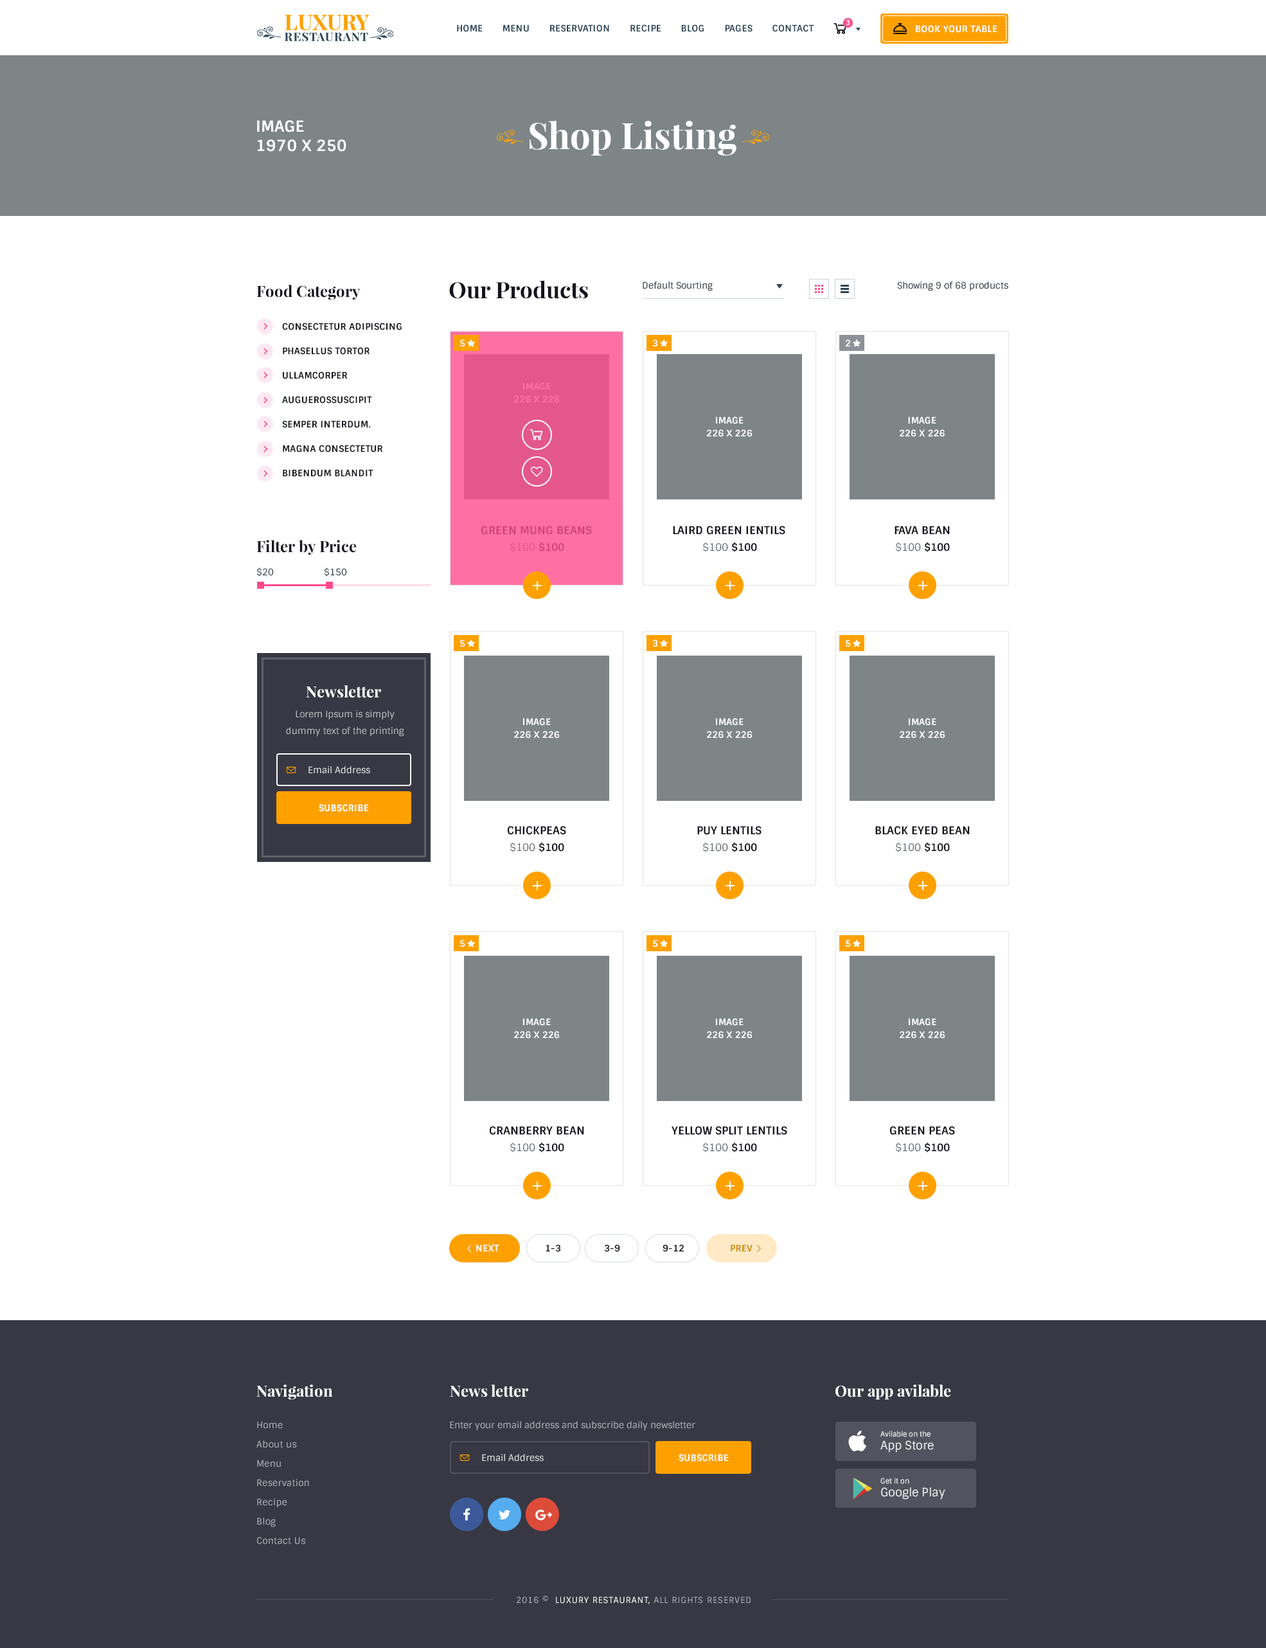
<style>
.page{position:relative;width:1266px;height:1648px;background:#ffffff}
.page>*{position:absolute;margin:0}
.t1{font:9px "Sintony-Bold";letter-spacing:0.025em;color:#2c465a;text-transform:uppercase}
.t2{font:7.1px "Sintony-Bold";letter-spacing:0.025em;color:#ffffff;text-transform:uppercase}
.t3{font:9px "Sintony-Bold";letter-spacing:0.025em;color:#ffffff;text-transform:uppercase}
.t4{font:15.4px/19.3px "Sintony-Bold";letter-spacing:0.005em;color:#ffffff;text-transform:uppercase}
.t5{font:36px "PlayfairDisplay-Bold";color:#ffffff}
.t6{font:22.5px "PlayfairDisplay-Bold";color:#14141d}
.t7{font:9px "Sintony";color:#363d43}
.t8{font:15.4px "PlayfairDisplay-Bold";color:#14141d}
.t9{font:9px/24.4px "Sintony-Bold";letter-spacing:0.025em;color:#14141d;text-transform:uppercase}
.t10{font:9px "Sintony-Bold";color:#ffffff;text-transform:uppercase}
.t11{font:9px/12.9px "Sintony-Bold";letter-spacing:0.005em;color:#fe70a4;text-transform:uppercase}
.t12{font:9px/12.9px "Sintony-Bold";letter-spacing:0.005em;color:#ffffff;text-transform:uppercase}
.t13{font:10.9px "Sintony-Bold";color:#cf4177;text-transform:uppercase}
.t14{font:10.9px "Sintony-Bold";color:#14141d;text-transform:uppercase}
.t15{font:10.3px "Sintony";color:#cf4177}
.t16{font:10.3px "Sintony-Bold";color:#cf4177}
.t17{font:10.3px "Sintony";color:#5c6369}
.t18{font:10.3px "Sintony-Bold";color:#14141d}
.t19{font:15.4px "PlayfairDisplay-Bold";color:#ffffff}
.t20{font:9px/16.7px "Sintony";color:#bcbdc1}
.t21{font:9px "Sintony";color:#e6e9eb}
.t22{font:9px "Sintony-Bold";color:#14141d}
.t23{font:9px "Sintony-Bold";letter-spacing:0.025em;color:#d38a0c;text-transform:uppercase}
.t24{font:9px/19.3px "Sintony";letter-spacing:0.025em;color:#adb2b7}
.t25{font:9px "Sintony";color:#adb2b7}
.t26{font:7.1px/12.9px "Sintony";color:#edf1f3}
.t27{font:11.6px/12.9px "Sintony";color:#edf1f3}
.t28{font:8.4px "Sintony";letter-spacing:0.075em;color:#adb2b7;text-transform:uppercase}
.t29{font:8.4px "Sintony";letter-spacing:0.075em;color:#ffffff;text-transform:uppercase}
</style>
<div class="page">
<p class="t1" style="left:457px;top:24px;width:357px;height:8px">Home       menu       reservation       recipe       blog       Pages       contact</p>
<p class="t2" style="left:846px;top:19px;width:5px;height:7px">3</p>
<p class="t3" style="left:916px;top:25px;width:82px;height:8px">Book your table</p>
<p class="t4" style="left:257px;top:120px;width:89px;height:32px">Image<br>1970 x 250</p>
<p class="t5" style="left:530px;top:120px;width:207px;height:36px">Shop Listing</p>
<p class="t6" style="left:449px;top:280px;width:139px;height:19px">Our Products</p>
<p class="t7" style="left:643px;top:282px;width:70px;height:9px">Default Sourting</p>
<p class="t7" style="left:897px;top:282px;width:112px;height:9px">Showing 9 of 68 products</p>
<p class="t8" style="left:256px;top:285px;width:105px;height:15px">Food Category</p>
<p class="t9" style="left:282px;top:323px;width:120px;height:154px">consectetur adipiscing<br>Phasellus tortor<br>ullamcorper<br>auguerossuscipit<br>semper interdum.<br>magna consectetur<br>bibendum blandit</p>
<p class="t10" style="left:460px;top:339px;width:5px;height:8px">5</p>
<p class="t10" style="left:652px;top:339px;width:6px;height:8px">3</p>
<p class="t10" style="left:846px;top:339px;width:5px;height:7px">2</p>
<p class="t11" style="left:514px;top:382px;width:45px;height:21px;text-align:center">Image<br>226 x 226</p>
<p class="t12" style="left:707px;top:417px;width:45px;height:20px;text-align:center">Image<br>226 x 226</p>
<p class="t12" style="left:900px;top:417px;width:45px;height:20px;text-align:center">Image<br>226 x 226</p>
<p class="t13" style="left:482px;top:526px;width:110px;height:9px">green mung beans</p>
<p class="t14" style="left:673px;top:526px;width:113px;height:9px">laird green ientils</p>
<p class="t14" style="left:895px;top:526px;width:55px;height:8px">Fava bean</p>
<p class="t8" style="left:256px;top:540px;width:101px;height:15px">Filter by Price</p>
<p class="t15" style="left:510px;top:542px;width:54px;height:10px">$100 <span class="t16">$100</span></p>
<p class="t17" style="left:703px;top:542px;width:54px;height:10px">$100 <span class="t18">$100</span></p>
<p class="t17" style="left:896px;top:542px;width:54px;height:10px">$100 <span class="t18">$100</span></p>
<p class="t7" style="left:256px;top:568px;width:18px;height:9px">$20</p>
<p class="t7" style="left:324px;top:568px;width:23px;height:9px">$150</p>
<p class="t10" style="left:460px;top:640px;width:5px;height:7px">5</p>
<p class="t10" style="left:652px;top:640px;width:6px;height:7px">3</p>
<p class="t10" style="left:846px;top:640px;width:5px;height:7px">5</p>
<p class="t19" style="left:306px;top:685px;width:75px;height:13px">Newsletter</p>
<p class="t20" style="left:286px;top:710px;width:118px;height:27px;text-align:center">Lorem Ipsum is simply dummy text of the printing and typesetting industry</p>
<p class="t12" style="left:514px;top:718px;width:45px;height:21px;text-align:center">Image<br>226 x 226</p>
<p class="t12" style="left:707px;top:718px;width:45px;height:21px;text-align:center">Image<br>226 x 226</p>
<p class="t12" style="left:900px;top:718px;width:45px;height:21px;text-align:center">Image<br>226 x 226</p>
<p class="t21" style="left:309px;top:766px;width:61px;height:8px">Email Address</p>
<p class="t3" style="left:319px;top:804px;width:50px;height:8px">Subscribe</p>
<p class="t14" style="left:508px;top:826px;width:58px;height:9px">chickpeas</p>
<p class="t14" style="left:698px;top:826px;width:64px;height:9px">puy lentils</p>
<p class="t14" style="left:876px;top:826px;width:94px;height:9px">black eyed bean</p>
<p class="t17" style="left:510px;top:842px;width:54px;height:10px">$100 <span class="t18">$100</span></p>
<p class="t17" style="left:703px;top:842px;width:54px;height:10px">$100 <span class="t18">$100</span></p>
<p class="t17" style="left:896px;top:842px;width:54px;height:10px">$100 <span class="t18">$100</span></p>
<p class="t10" style="left:460px;top:940px;width:5px;height:8px">5</p>
<p class="t10" style="left:653px;top:940px;width:5px;height:8px">5</p>
<p class="t10" style="left:846px;top:940px;width:5px;height:8px">5</p>
<p class="t12" style="left:514px;top:1018px;width:45px;height:21px;text-align:center">Image<br>226 x 226</p>
<p class="t12" style="left:707px;top:1018px;width:45px;height:21px;text-align:center">Image<br>226 x 226</p>
<p class="t12" style="left:900px;top:1018px;width:45px;height:21px;text-align:center">Image<br>226 x 226</p>
<p class="t14" style="left:490px;top:1126px;width:94px;height:9px">cranberry bean</p>
<p class="t14" style="left:672px;top:1126px;width:116px;height:9px">Yellow split lentils</p>
<p class="t14" style="left:890px;top:1126px;width:65px;height:9px">green peas</p>
<p class="t17" style="left:510px;top:1142px;width:54px;height:11px">$100 <span class="t18">$100</span></p>
<p class="t17" style="left:703px;top:1142px;width:54px;height:11px">$100 <span class="t18">$100</span></p>
<p class="t17" style="left:896px;top:1142px;width:54px;height:11px">$100 <span class="t18">$100</span></p>
<p class="t3" style="left:476px;top:1245px;width:24px;height:7px">Next</p>
<p class="t22" style="left:546px;top:1245px;width:15px;height:7px">1-3</p>
<p class="t22" style="left:604px;top:1245px;width:16px;height:7px">3-9</p>
<p class="t22" style="left:663px;top:1245px;width:21px;height:7px">9-12</p>
<p class="t23" style="left:731px;top:1245px;width:22px;height:7px">prev</p>
<p class="t19" style="left:256px;top:1385px;width:77px;height:15px">Navigation</p>
<p class="t19" style="left:450px;top:1385px;width:78px;height:13px">News letter</p>
<p class="t19" style="left:836px;top:1385px;width:115px;height:15px">Our app avilable</p>
<p class="t24" style="left:256px;top:1421px;width:53px;height:124px">Home<br>About us<br>Menu<br>Reservation<br>Recipe<br>Blog<br>Contact Us</p>
<p class="t25" style="left:450px;top:1421px;width:246px;height:10px">Enter your email address and subscribe daily newsletter</p>
<p class="t26" style="left:881px;top:1431px;width:53px;height:22px">Avilable on the<br><span class="t27">App Store</span></p>
<p class="t21" style="left:482px;top:1454px;width:62px;height:8px">Email Address</p>
<p class="t3" style="left:679px;top:1454px;width:49px;height:8px">Subscribe</p>
<p class="t27" style="left:881px;top:1478px;width:65px;height:22px"><span class="t26">Get it on<br></span>Google Play</p>
<p class="t28" style="left:517px;top:1596px;width:234px;height:9px">2016 ©  <span class="t29">Luxury RestaurAnt,</span> All rights reserved</p>
</div>
